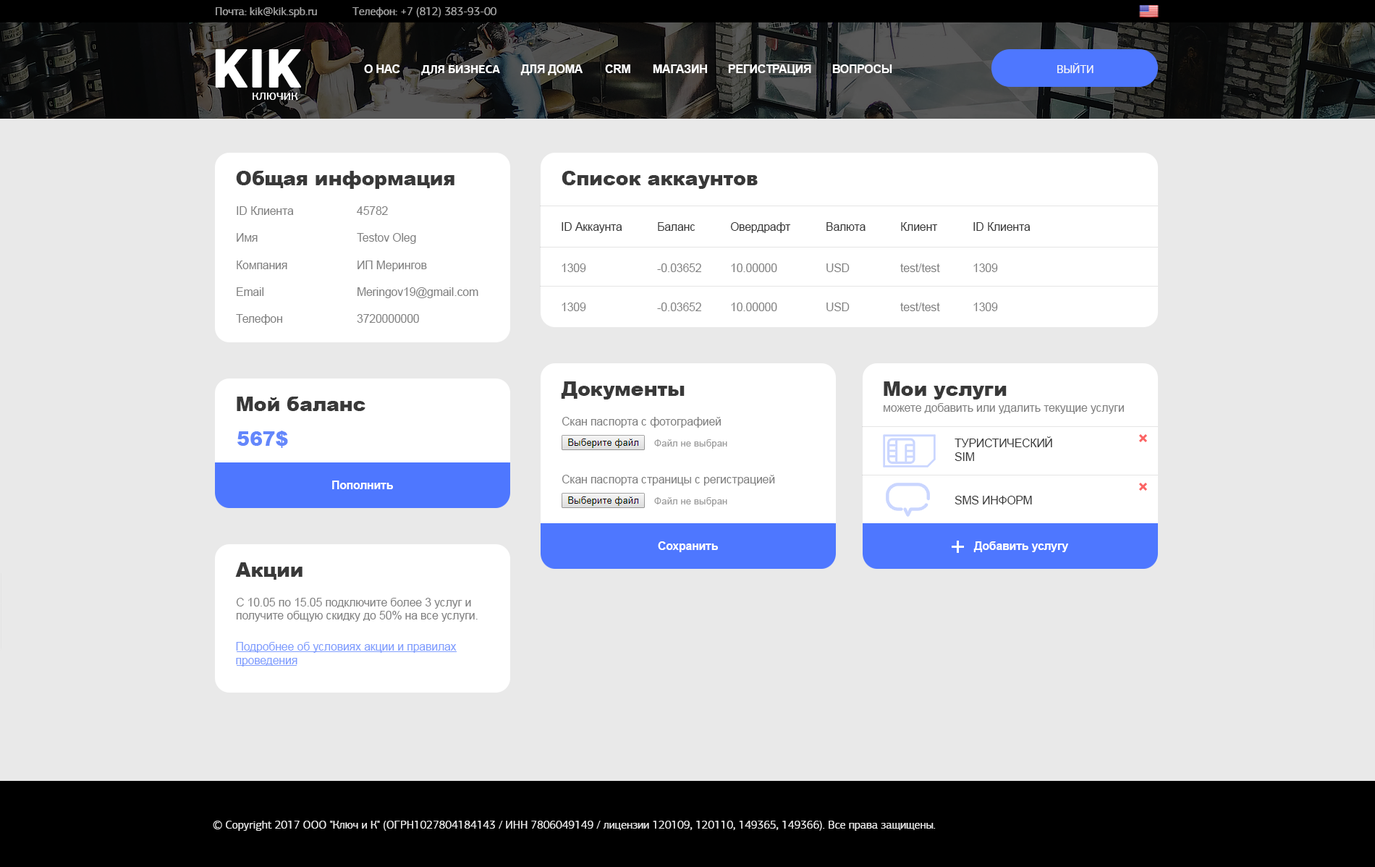
<style>
.page{position:relative;width:1375px;height:867px;background:#e9e9e9}
.page>*{position:absolute;margin:0}
.t1{font:11.3px "PFAgoraSansPro-Regular";color:#a5a5a5}
.t2{font:57.9px "PFSquareSansPro-Bold";color:#ffffff}
.t3{font:11.3px "Arial-BoldMT";color:#ffffff;text-transform:uppercase}
.t4{font:11.3px "PFAgoraSansPro-Bold";color:#ffffff;text-transform:uppercase}
.t5{font:11.3px "PFAgoraSansPro-Regular";color:#f8f8f8;text-transform:uppercase}
.t6{font:14.5px "PFAgoraSansPro-Regular";color:#ffffff}
.t7{font:19.3px "Arial-Black";color:#393939}
.t8{font:11.3px "ArialMT";color:#818181}
.t9{font:11.3px "ArialMT";color:#393939}
.t10{font:19.3px "Arial-Black";color:#6487fb}
.t11{font:11.3px "ArialMT";color:#393939;text-transform:uppercase}
.t12{font:9.7px "ArialMT";color:#9c9c9c}
.t13{font:11.3px "Arial-BoldMT";color:#ffffff}
.t14{font:11.3px "ArialMT";color:#809efe}
.t15{font:11.3px "PFAgoraSansPro-Regular";color:#e7e7e7}
</style>
<div class="page">
<p class="t1" style="left:216px;top:7px;width:101px;height:10px">Почта: kik@kik.spb.ru</p>
<p class="t1" style="left:352px;top:7px;width:145px;height:10px">Телефон: +7 (812) 383-93-00</p>
<p class="t2" style="left:215px;top:49px;width:86px;height:39px">KIK</p>
<p class="t3" style="left:364px;top:64px;width:36px;height:9px">О нас</p>
<p class="t4" style="left:421px;top:65px;width:79px;height:10px">Для бизнеса</p>
<p class="t3" style="left:520px;top:64px;width:63px;height:11px">для дома</p>
<p class="t3" style="left:605px;top:64px;width:25px;height:9px">CRM</p>
<p class="t3" style="left:653px;top:64px;width:54px;height:9px">Магазин</p>
<p class="t3" style="left:728px;top:64px;width:83px;height:11px">Регистрация</p>
<p class="t3" style="left:832px;top:64px;width:60px;height:9px">Вопросы</p>
<p class="t5" style="left:1057px;top:63px;width:37px;height:10px">Выйти</p>
<p class="t6" style="left:253px;top:93px;width:45px;height:7px">ключик</p>
<p class="t7" style="left:236px;top:171px;width:219px;height:18px">Общая информация</p>
<p class="t7" style="left:562px;top:171px;width:196px;height:18px">Список аккаунтов</p>
<p class="t8" style="left:236px;top:206px;width:58px;height:119px">ID Клиента <br><br>Имя <br><br>Компания <br><br>Email <br><br>Телефон</p>
<p class="t8" style="left:357px;top:206px;width:121px;height:117px">45782<br><br>Testov Oleg <br><br>ИП Мерингов<br><br>Meringov19@gmail.com<br><br>3720000000</p>
<p class="t9" style="left:562px;top:222px;width:60px;height:11px">ID Аккаунта</p>
<p class="t9" style="left:658px;top:222px;width:37px;height:9px">Баланс</p>
<p class="t9" style="left:730px;top:222px;width:61px;height:11px">Овердрафт</p>
<p class="t9" style="left:827px;top:222px;width:39px;height:9px">Валюта</p>
<p class="t9" style="left:901px;top:222px;width:37px;height:9px">Клиент</p>
<p class="t9" style="left:973px;top:222px;width:58px;height:9px">ID Клиента</p>
<p class="t8" style="left:562px;top:263px;width:24px;height:9px">1309</p>
<p class="t8" style="left:657px;top:263px;width:44px;height:9px">-0.03652</p>
<p class="t8" style="left:731px;top:263px;width:46px;height:9px">10.00000</p>
<p class="t8" style="left:827px;top:263px;width:23px;height:9px">USD</p>
<p class="t8" style="left:900px;top:263px;width:40px;height:9px">test/test</p>
<p class="t8" style="left:973px;top:263px;width:25px;height:9px">1309</p>
<p class="t8" style="left:562px;top:303px;width:24px;height:8px">1309</p>
<p class="t8" style="left:657px;top:303px;width:44px;height:8px">-0.03652</p>
<p class="t8" style="left:731px;top:303px;width:46px;height:8px">10.00000</p>
<p class="t8" style="left:827px;top:303px;width:23px;height:8px">USD</p>
<p class="t8" style="left:900px;top:303px;width:40px;height:8px">test/test</p>
<p class="t8" style="left:973px;top:303px;width:25px;height:8px">1309</p>
<p class="t7" style="left:561px;top:381px;width:124px;height:19px">Документы</p>
<p class="t7" style="left:884px;top:381px;width:123px;height:19px">Мои услуги</p>
<p class="t7" style="left:237px;top:397px;width:129px;height:14px">Мой баланс</p>
<p class="t8" style="left:884px;top:403px;width:240px;height:11px">можете добавить или удалить текущие услуги</p>
<p class="t8" style="left:562px;top:417px;width:159px;height:11px">Скан паспорта с фотографией</p>
<p class="t10" style="left:237px;top:431px;width:51px;height:17px">567$</p>
<p class="t11" style="left:955px;top:436px;width:97px;height:25px">Туристический <br>Sim</p>
<p class="t12" style="left:654px;top:439px;width:73px;height:10px">Файл не выбран</p>
<p class="t13" style="left:332px;top:481px;width:61px;height:8px">Пополнить</p>
<p class="t8" style="left:562px;top:475px;width:213px;height:11px">Скан паспорта страницы с регистрацией</p>
<p class="t12" style="left:654px;top:497px;width:73px;height:10px">Файл не выбран</p>
<p class="t11" style="left:955px;top:496px;width:77px;height:8px">Sms ИНФОРМ</p>
<p class="t13" style="left:658px;top:541px;width:60px;height:11px">Сохранить</p>
<p class="t13" style="left:973px;top:541px;width:96px;height:11px">Добавить услугу</p>
<p class="t7" style="left:235px;top:562px;width:68px;height:18px">Акции</p>
<p class="t8" style="left:236px;top:598px;width:242px;height:24px">С 10.05 по 15.05 подключите более 3 услуг и получите общую скидку до 50% на все услуги.</p>
<p class="t14" style="left:236px;top:642px;width:221px;height:25px">Подробнее об условиях акции и правилах<br>проведения</p>
<p class="t15" style="left:213px;top:821px;width:723px;height:10px">© Copyright 2017 ООО "Ключ и К" (ОГРН1027804184143 / ИНН 7806049149 / лицензии 120109, 120110, 149365, 149366). Все права защищены.</p>
</div>
